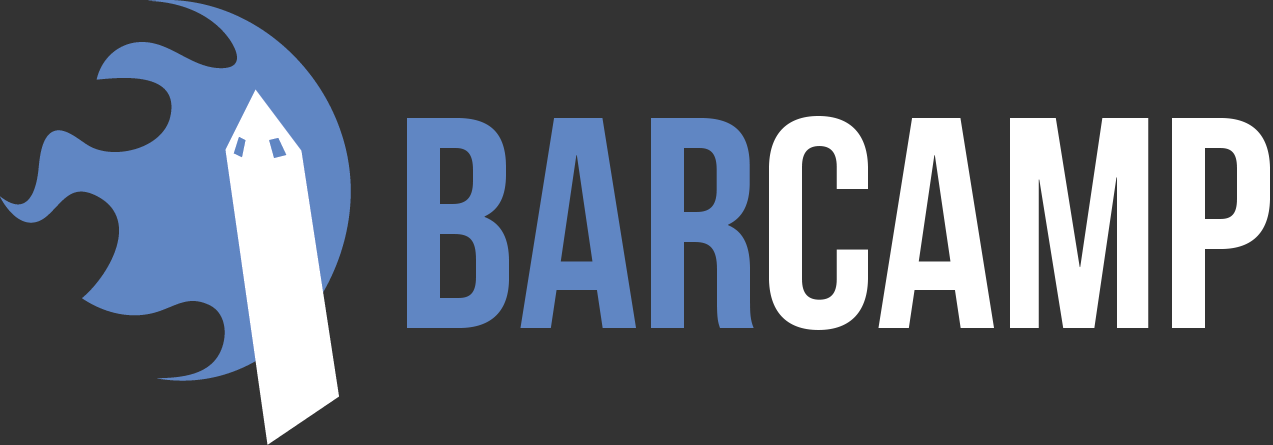
<style>
.page{position:relative;width:1273px;height:445px;background:#333333}
.page>*{position:absolute;margin:0}
.t1{font:300px "BebasNeue";color:#ffffff}
.t2{font:300px "BebasNeue";color:#6086c3}
</style>
<div class="page">
<p class="t1" style="left:407px;top:116px;width:863px;height:214px"><span class="t2">bar</span>camp</p>
</div>
